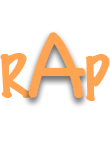
<style>
.page{position:relative;width:110px;height:150px;background:#ffffff}
.page>*{position:absolute;margin:0}
.t1{font:94px "ChalkboardSE-Light";color:#ffa452}
.t2{font:55px "MarkerFelt-Thin";color:#ffa452}
</style>
<div class="page">
<p class="t1" style="left:28px;top:32px;width:58px;height:66px">A</p>
<p class="t2" style="left:0px;top:53px;width:32px;height:45px">R</p>
<p class="t2" style="left:86px;top:54px;width:24px;height:47px">P</p>
</div>
